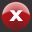
<style>
.page{position:relative;width:32px;height:32px;background:#333333}
.page>*{position:absolute;margin:0}
.t1{font:15.2px "DFGothic-UB-WINP-RKSJ-H";color:#ffffff;scale:1.22 1}
</style>
<div class="page">
<p class="t1" style="left:9px;top:10px;width:14px;height:11px">X</p>
</div>
